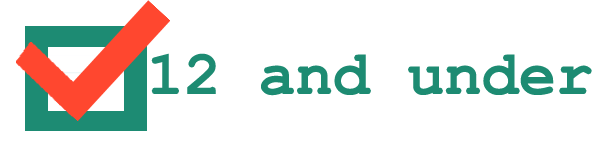
<style>
.page{position:relative;width:600px;height:150px;background:#ffffff}
.page>*{position:absolute;margin:0}
.t1{font:62px "CourierNewPS-BoldMT";color:#1d8b72}
</style>
<div class="page">
<p class="t1" style="left:151px;top:53px;width:441px;height:43px">12 and under</p>
</div>
